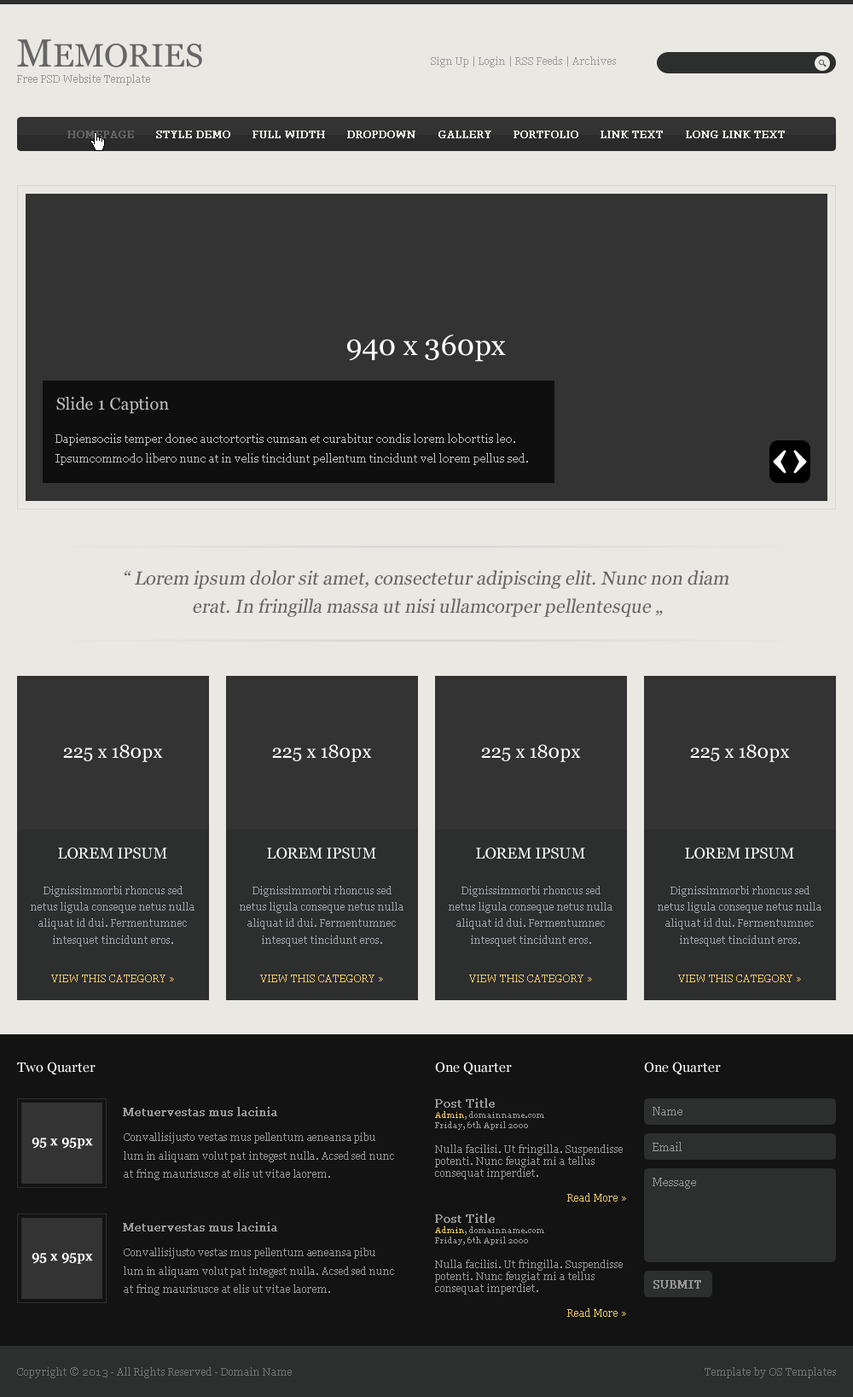
<style>
.page{position:relative;width:853px;height:1397px;background:#333333}
.page>*{position:absolute;margin:0}
.t1{font:32.4px "Georgia";color:#666666}
.t2{font:39.3px "Georgia";color:#666666}
.t3{font:10.2px "Georgia";color:#9f9f9f}
.t4{font:10.2px "Georgia";color:#999999}
.t5{font:10.2px "Georgia";color:#666666;font-weight:bold}
.t6{font:10.2px "Georgia";color:#e9e8e3;font-weight:bold}
.t7{font:29px "Georgia";color:#ffffff}
.t8{font:17.1px "Georgia";color:#c2c2c2}
.t9{font:11.1px/20px "Georgia";color:#c0c0c0}
.t10{font:18.8px/28.2px "Georgia";color:#666666;font-style:italic}
.t11{font:18.8px/18.8px "Georgia";color:#666666;font-style:italic}
.t12{font:18.8px "Georgia";color:#ffffff}
.t13{font:15.4px "Georgia";color:#ffffff}
.t14{font:10.2px/16.4px "Georgia";color:#9fa4aa}
.t15{font:10.2px "Georgia";color:#ebc563}
.t16{font:13.7px "Georgia";color:#ffffff}
.t17{font:11.9px "Georgia";color:#989898;font-weight:bold}
.t18{font:10.2px/12.3px "Georgia";color:#989898}
.t19{font:11.9px/14.3px "Georgia";color:#989898;font-weight:bold}
.t20{font:8.5px/10.2px "Georgia";color:#ebc563}
.t21{font:8.5px/10.2px "Georgia";color:#989898}
.t22{font:10.2px/12.3px "Georgia";color:#ebc563}
.t23{font:11.1px "Georgia";color:#989898}
.t24{font:10.2px/18.4px "Georgia";letter-spacing:-0.01em;color:#989898}
.t25{font:13.7px "Georgia";color:#ffffff;font-weight:bold}
.t26{font:11.1px "Georgia";color:#989898;font-weight:bold}
.t27{font:10.2px "Georgia";color:#737373}
</style>
<div class="page">
<p class="t1" style="left:17px;top:39px;width:185px;height:28px"><span class="t2">M</span>EMORIES</p>
<p class="t3" style="left:431px;top:56px;width:185px;height:11px">Sign Up | Login | RSS Feeds | Archives</p>
<p class="t4" style="left:17px;top:74px;width:133px;height:11px">Free PSD Website Template</p>
<p class="t5" style="left:67px;top:131px;width:67px;height:7px">HOMEPAGE</p>
<p class="t6" style="left:156px;top:131px;width:74px;height:7px">STYLE DEMO</p>
<p class="t6" style="left:253px;top:131px;width:72px;height:7px">FULL WIDTH</p>
<p class="t6" style="left:347px;top:131px;width:69px;height:7px">DROPDOWN</p>
<p class="t6" style="left:439px;top:131px;width:53px;height:7px">GALLERY</p>
<p class="t6" style="left:514px;top:131px;width:65px;height:7px">PORTFOLIO</p>
<p class="t6" style="left:601px;top:131px;width:62px;height:7px">LINK TEXT</p>
<p class="t6" style="left:686px;top:131px;width:99px;height:7px">LONG LINK TEXT</p>
<p class="t7" style="left:347px;top:335px;width:159px;height:27px">940 x 360px</p>
<p class="t8" style="left:56px;top:397px;width:113px;height:17px">Slide 1 Caption</p>
<p class="t9" style="left:55px;top:434px;width:473px;height:31px">Dapiensociis temper donec auctortortis cumsan et curabitur condis lorem loborttis leo. Ipsumcommodo libero nunc at in velis tincidunt pellentum tincidunt vel lorem pellus sed.</p>
<p class="t10" style="left:125px;top:570px;width:604px;height:47px;text-align:center"><span class="t11">“</span> Lorem ipsum dolor sit amet, consectetur adipiscing elit. Nunc non diam <br>erat. In fringilla massa ut nisi ullamcorper pellentesque „</p>
<p class="t12" style="left:63px;top:744px;width:100px;height:18px">225 x 180px</p>
<p class="t12" style="left:272px;top:744px;width:100px;height:18px">225 x 180px</p>
<p class="t12" style="left:481px;top:744px;width:100px;height:18px">225 x 180px</p>
<p class="t12" style="left:690px;top:744px;width:100px;height:18px">225 x 180px</p>
<p class="t13" style="left:58px;top:848px;width:109px;height:11px">LOREM IPSUM</p>
<p class="t13" style="left:267px;top:848px;width:109px;height:11px">LOREM IPSUM</p>
<p class="t13" style="left:476px;top:848px;width:109px;height:11px">LOREM IPSUM</p>
<p class="t13" style="left:685px;top:848px;width:110px;height:11px">LOREM IPSUM</p>
<p class="t14" style="left:31px;top:886px;width:164px;height:61px;text-align:center">Dignissimmorbi rhoncus sed netus ligula conseque netus nulla aliquat id dui. Fermentumnec intesquet tincidunt eros.</p>
<p class="t14" style="left:240px;top:886px;width:164px;height:61px;text-align:center">Dignissimmorbi rhoncus sed netus ligula conseque netus nulla aliquat id dui. Fermentumnec intesquet tincidunt eros.</p>
<p class="t14" style="left:449px;top:886px;width:164px;height:61px;text-align:center">Dignissimmorbi rhoncus sed netus ligula conseque netus nulla aliquat id dui. Fermentumnec intesquet tincidunt eros.</p>
<p class="t14" style="left:658px;top:886px;width:164px;height:61px;text-align:center">Dignissimmorbi rhoncus sed netus ligula conseque netus nulla aliquat id dui. Fermentumnec intesquet tincidunt eros.</p>
<p class="t15" style="left:51px;top:975px;width:123px;height:7px">VIEW THIS CATEGORY »</p>
<p class="t15" style="left:260px;top:975px;width:123px;height:7px">VIEW THIS CATEGORY »</p>
<p class="t15" style="left:469px;top:975px;width:123px;height:7px">VIEW THIS CATEGORY »</p>
<p class="t15" style="left:679px;top:975px;width:122px;height:7px">VIEW THIS CATEGORY »</p>
<p class="t16" style="left:17px;top:1062px;width:79px;height:13px">Two Quarter</p>
<p class="t16" style="left:435px;top:1062px;width:77px;height:13px">One Quarter</p>
<p class="t16" style="left:644px;top:1062px;width:77px;height:13px">One Quarter</p>
<p class="t17" style="left:123px;top:1107px;width:154px;height:9px">Metuervestas mus lacinia</p>
<p class="t18" style="left:435px;top:1098px;width:191px;height:104px"><span class="t19">Post Title<br></span><span class="t20">Admin</span><span class="t21">, domainname.com<br>Friday, 6th April 2000<br></span><br>Nulla facilisi. Ut fringilla. Suspendisse potenti. Nunc feugiat mi a tellus consequat imperdiet.<br><br><span class="t22">Read More »</span></p>
<p class="t23" style="left:653px;top:1107px;width:30px;height:8px">Name</p>
<p class="t24" style="left:124px;top:1133px;width:270px;height:47px">Convallisijusto vestas mus pellentum aeneansa pibu lum in aliquam volut pat integest nulla. Acsed sed nunc at fring maurisusce at elis ut vitae laorem.</p>
<p class="t25" style="left:32px;top:1138px;width:61px;height:11px">95 x 95px</p>
<p class="t23" style="left:653px;top:1142px;width:29px;height:9px">Email</p>
<p class="t23" style="left:653px;top:1178px;width:43px;height:11px">Message</p>
<p class="t18" style="left:435px;top:1214px;width:191px;height:103px"><span class="t19">Post Title<br></span><span class="t20">Admin</span><span class="t21">, domainname.com<br>Friday, 6th April 2000<br></span><br>Nulla facilisi. Ut fringilla. Suspendisse potenti. Nunc feugiat mi a tellus consequat imperdiet.<br><br><span class="t22">Read More »</span></p>
<p class="t17" style="left:123px;top:1222px;width:154px;height:10px">Metuervestas mus lacinia</p>
<p class="t25" style="left:32px;top:1253px;width:61px;height:11px">95 x 95px</p>
<p class="t24" style="left:124px;top:1248px;width:270px;height:48px">Convallisijusto vestas mus pellentum aeneansa pibu lum in aliquam volut pat integest nulla. Acsed sed nunc at fring maurisusce at elis ut vitae laorem.</p>
<p class="t26" style="left:654px;top:1280px;width:48px;height:9px">SUBMIT</p>
<p class="t27" style="left:17px;top:1367px;width:275px;height:11px">Copyright © 2013 - All Rights Reserved - Domain Name</p>
<p class="t27" style="left:705px;top:1367px;width:131px;height:11px">Template by OS Templates</p>
</div>
